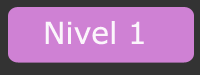
<style>
.page{position:relative;width:200px;height:75px;background:#cf81d4}
.page>*{position:absolute;margin:0}
.t1{font:30px "Verdana";color:#fbf6fb}
</style>
<div class="page">
<p class="t1" style="left:45px;top:21px;width:99px;height:24px">Nivel 1</p>
</div>
